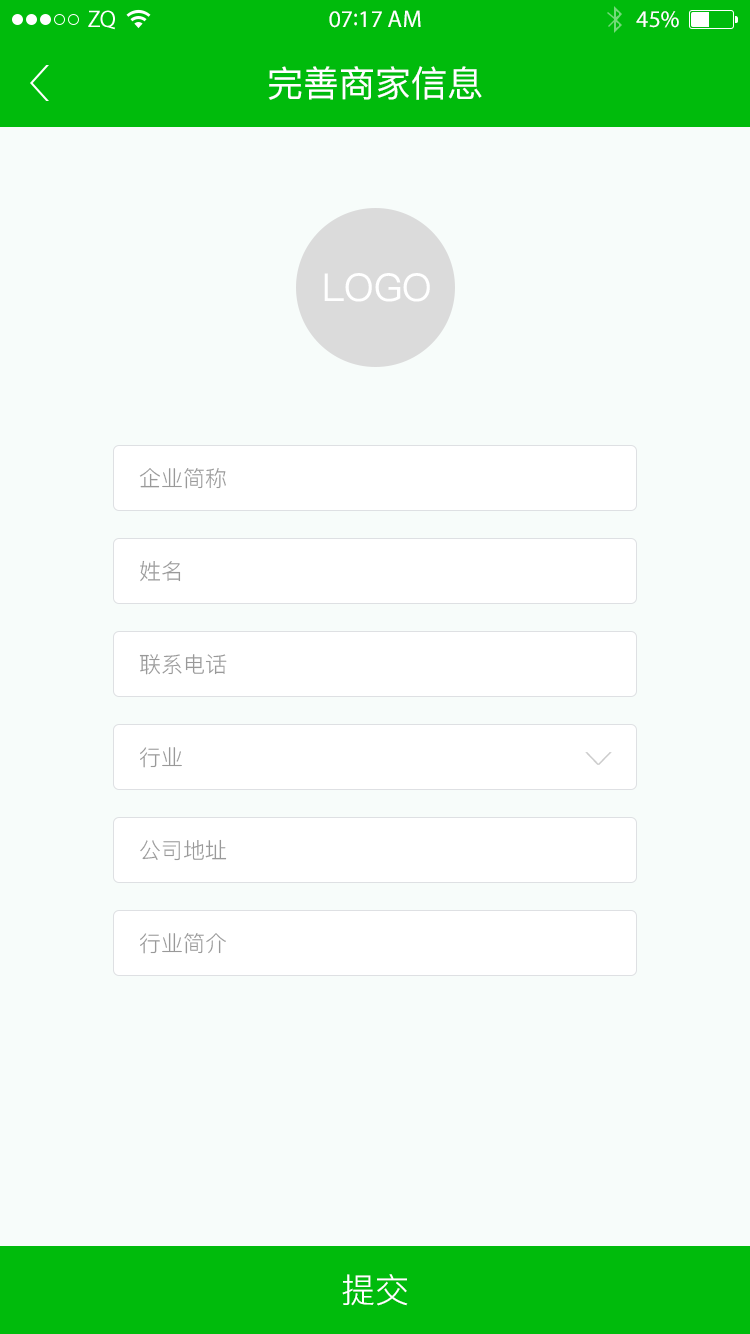
<style>
.page{position:relative;width:750px;height:1334px;background:#f7fcfa}
.page>*{position:absolute;margin:0}
.t1{font:24px "MyriadPro-Regular";color:#ffffff}
.t2{font:36px "PingFang-SC-Medium";color:#ffffff}
.t3{font:38.4px "PingFang-SC-Medium";color:#ffffff}
.t4{font:22px "PingFang-SC-Regular";color:#999999}
.t5{font:51.8px "PingFang-SC-Light";color:#cccccc;scale:0.48 1}
.t6{font:34px "PingFang-SC-Regular";color:#ffffff}
</style>
<div class="page">
<p class="t1" style="left:329px;top:10px;width:92px;height:18px">07:17 AM</p>
<p class="t1" style="left:636px;top:11px;width:43px;height:17px">45%</p>
<p class="t2" style="left:268px;top:66px;width:214px;height:34px">完善商家信息</p>
<p class="t3" style="left:324px;top:273px;width:106px;height:29px">LOGO</p>
<p class="t4" style="left:139px;top:468px;width:87px;height:21px">企业简称</p>
<p class="t4" style="left:140px;top:560px;width:41px;height:22px">姓名</p>
<p class="t4" style="left:139px;top:654px;width:88px;height:21px">联系电话</p>
<p class="t4" style="left:140px;top:747px;width:42px;height:21px">行业</p>
<p class="t5" style="left:585px;top:752px;width:27px;height:13px;rotate:90deg">&gt;</p>
<p class="t4" style="left:140px;top:839px;width:87px;height:22px">公司地址</p>
<p class="t4" style="left:140px;top:933px;width:86px;height:21px">行业简介</p>
<p class="t6" style="left:342px;top:1274px;width:66px;height:32px">提交</p>
</div>
